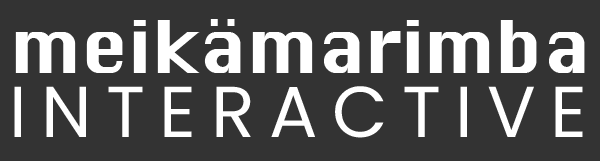
<style>
.page{position:relative;width:600px;height:161px;background:#333333}
.page>*{position:absolute;margin:0}
.t1{font:71px "Krungthep";color:#ffffff}
.t2{font:72px "Poppins-Regular";letter-spacing:0.2em;color:#ffffff}
</style>
<div class="page">
<p class="t1" style="left:15px;top:19px;width:570px;height:54px">meikämarimba</p>
<p class="t2" style="left:14px;top:86px;width:569px;height:52px">INTERACTIVE</p>
</div>
